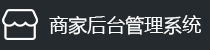
<style>
.page{position:relative;width:210px;height:50px;background:#252a2f}
.page>*{position:absolute;margin:0}
.t1{font:19px "MicrosoftYaHei";color:#ffffff}
</style>
<div class="page">
<p class="t1" style="left:49px;top:15px;width:152px;height:20px">商家后台管理系统</p>
</div>
